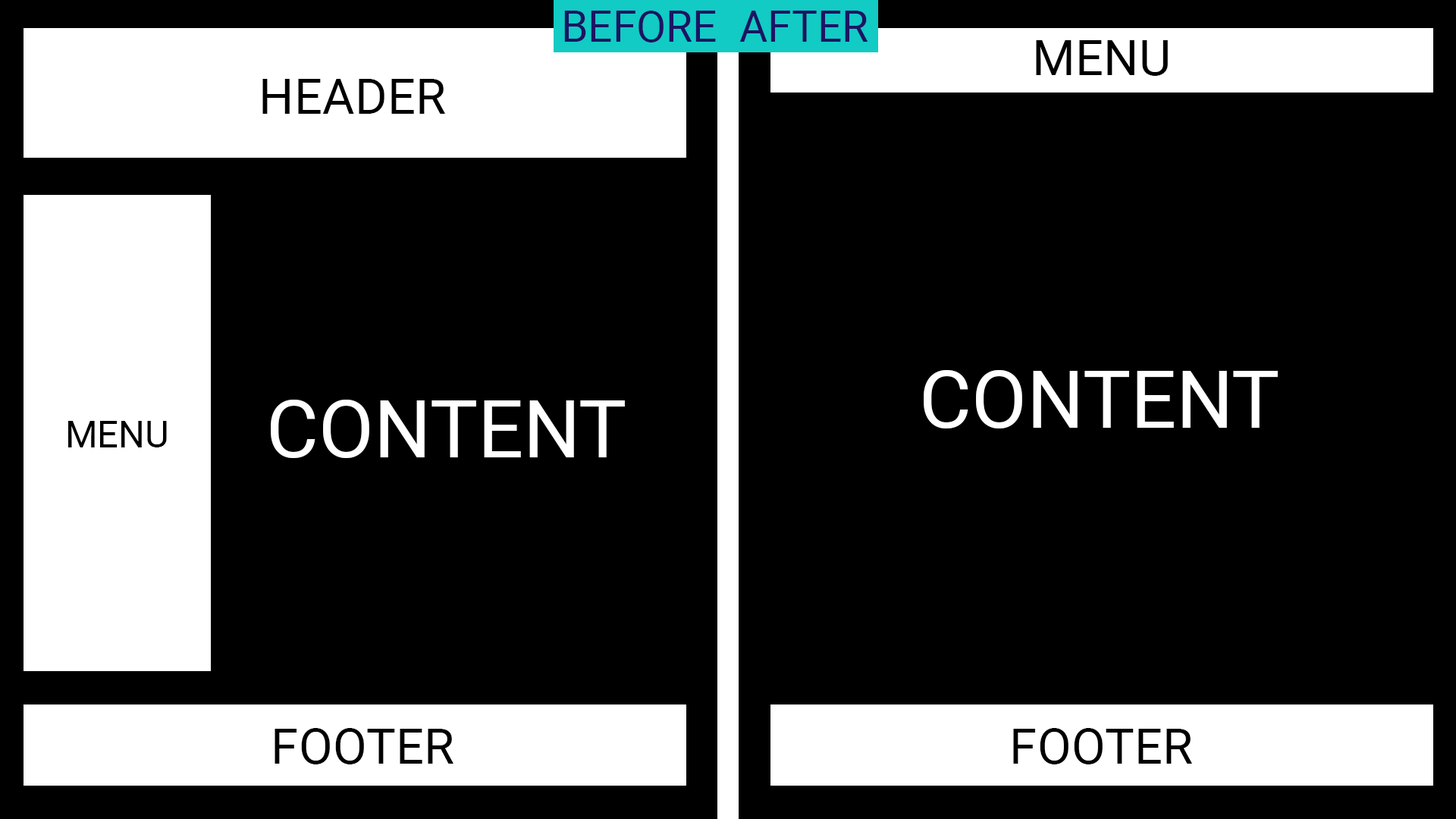
<style>
.page{position:relative;width:1456px;height:819px;background:#000000}
.page>*{position:absolute;margin:0}
.t1{font:43.2px "Roboto-Regular";color:#1b1464}
.t2{font:49.6px "Roboto-Regular";color:#000000}
.t3{font:80.1px "Roboto-Regular";color:#ffffff}
.t4{font:36.8px "Roboto-Regular";color:#000000}
</style>
<div class="page">
<p class="t1" style="left:564px;top:11px;width:152px;height:31px">BEFORE</p>
<p class="t1" style="left:739px;top:11px;width:129px;height:31px">AFTER</p>
<p class="t2" style="left:1036px;top:40px;width:132px;height:36px">MENU</p>
<p class="t2" style="left:262px;top:79px;width:183px;height:35px">HEADER</p>
<p class="t3" style="left:924px;top:370px;width:354px;height:58px">CONTENT</p>
<p class="t3" style="left:271px;top:400px;width:354px;height:58px">CONTENT</p>
<p class="t4" style="left:68px;top:421px;width:99px;height:26px">MENU</p>
<p class="t2" style="left:275px;top:728px;width:178px;height:36px">FOOTER</p>
<p class="t2" style="left:1013px;top:728px;width:179px;height:36px">FOOTER</p>
</div>
